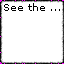
<style>
.page{position:relative;width:64px;height:64px;background:#ffffff}
.page>*{position:absolute;margin:0}
.t1{font:10px "Verdana";color:#000000}
</style>
<div class="page">
<p class="t1" style="left:4px;top:3px;width:56px;height:8px">See the ...</p>
</div>
